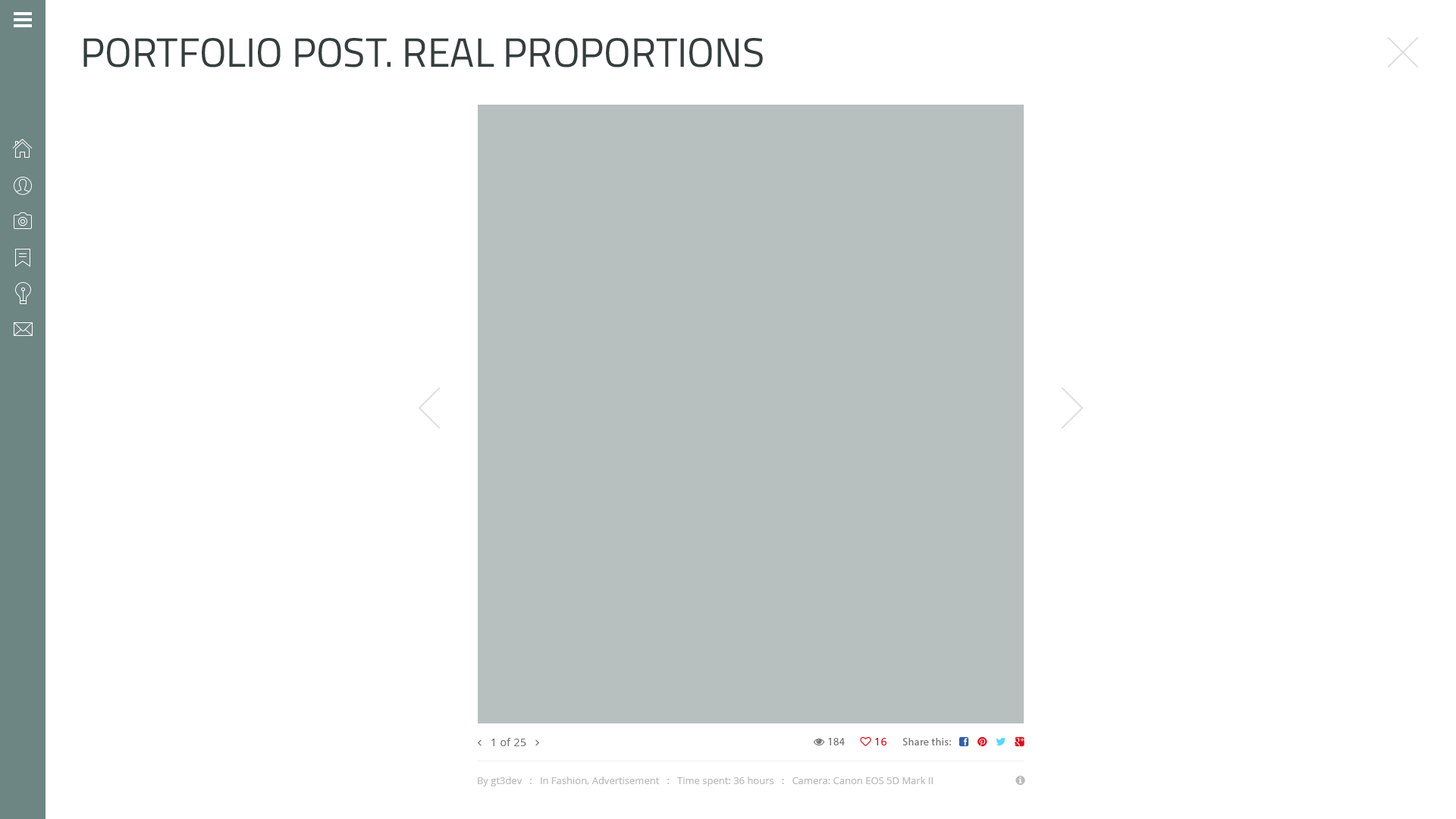
<style>
.page{position:relative;width:1456px;height:819px;background:#ffffff}
.page>*{position:absolute;margin:0}
.t1{font:40.9px "TitilliumWeb-Regular";color:#353e3d;text-transform:uppercase}
.t2{font:9.9px "OpenSans";color:#bababa}
</style>
<div class="page">
<p class="t1" style="left:83px;top:38px;width:680px;height:29px">Portfolio post. real proportions</p>
<p class="t2" style="left:478px;top:777px;width:455px;height:9px">By gt3dev   :   In Fashion, Advertisement   :   Time spent: 36 hours   :   Camera: Canon EOS 5D Mark II</p>
</div>
